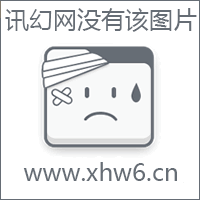
<style>
.page{position:relative;width:200px;height:200px;background:#ffffff}
.page>*{position:absolute;margin:0}
.t1{font:24px "MicrosoftYaHei";color:#666d75}
</style>
<div class="page">
<p class="t1" style="left:5px;top:8px;width:192px;height:24px">讯幻网没有该图片</p>
<p class="t1" style="left:23px;top:162px;width:154px;height:19px">www.xhw6.cn</p>
</div>
